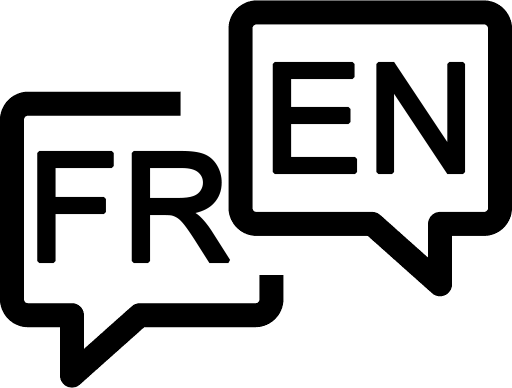
<style>
.page{position:relative;width:512px;height:388px;background:#ffffff}
.page>*{position:absolute;margin:0}
.t1{font:150px "ArialMT";color:#000000;font-weight:bold}
</style>
<div class="page">
<p class="t1" style="left:272px;top:61px;width:194px;height:114px">EN</p>
<p class="t1" style="left:37px;top:150px;width:194px;height:114px">FR</p>
</div>
